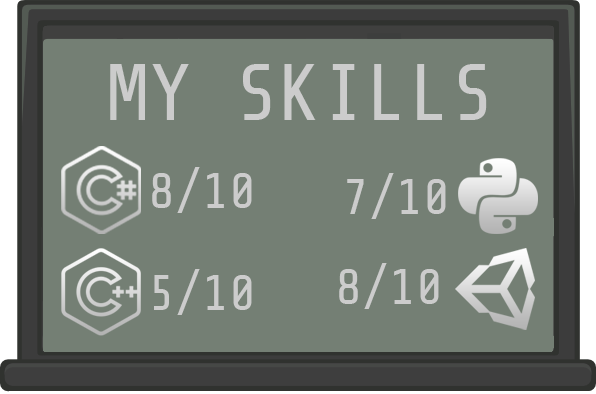
<style>
.page{position:relative;width:596px;height:394px;background:#747f74}
.page>*{position:absolute;margin:0}
.t1{font:80px "ShareTechMono-Regular";color:#cccccc}
.t2{font:50px "ShareTechMono-Regular";color:#cccccc}
</style>
<div class="page">
<p class="t1" style="left:110px;top:64px;width:377px;height:56px">MY SKILLS</p>
<p class="t2" style="left:152px;top:167px;width:100px;height:46px">8/10</p>
<p class="t2" style="left:347px;top:173px;width:99px;height:46px">7/10</p>
<p class="t2" style="left:154px;top:269px;width:98px;height:46px">5/10</p>
<p class="t2" style="left:339px;top:263px;width:100px;height:46px">8/10</p>
</div>
